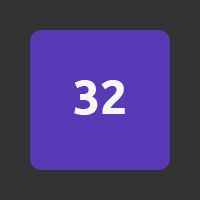
<style>
.page{position:relative;width:200px;height:200px;background:#333333}
.page>*{position:absolute;margin:0}
.t1{font:48px "Ubuntu-Bold";color:#f7f7f7}
</style>
<div class="page">
<p class="t1" style="left:74px;top:80px;width:51px;height:35px">32</p>
</div>
